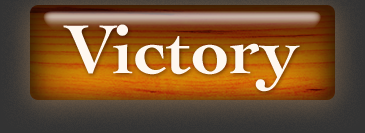
<style>
.page{position:relative;width:365px;height:133px}
.page>*{position:absolute;margin:0}
.t1{font:72.6px "Cochin-Bold";color:#fef7ef}
</style>
<div class="page">
<p class="t1" style="left:63px;top:24px;width:237px;height:68px">Victory</p>
</div>
